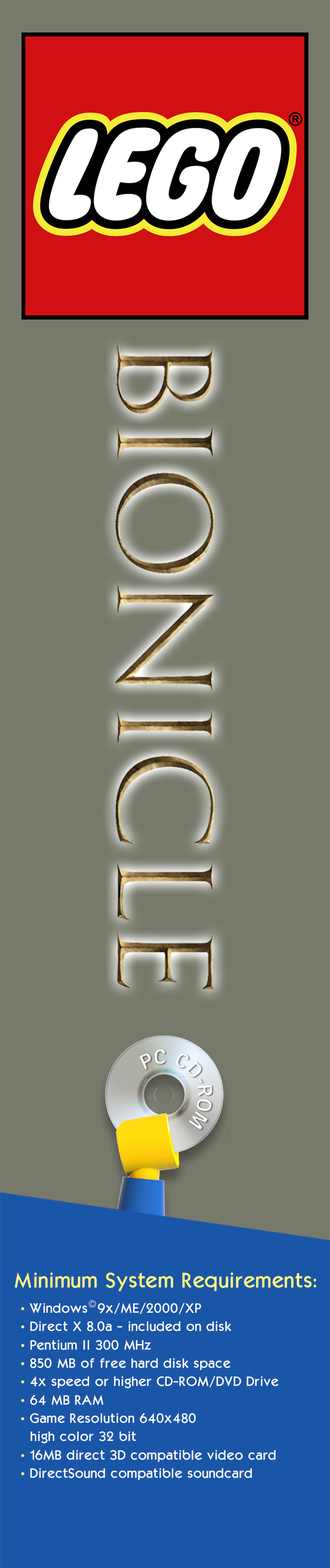
<style>
.page{position:relative;width:330px;height:1568px;background:#77796b}
.page>*{position:absolute;margin:0}
.t1{font:17.9px "KabelMedium";color:#fff97f}
.t2{font:8.8px "KabelMedium"}
.t3{font:11.5px/18.3px "KabelMedium";color:#ffffff}
.t4{font:11.5px/18.3px "KabelMedium";color:#fff97f}
</style>
<div class="page">
<p class="t1" style="left:14px;top:1272px;width:302px;height:19px">Minimum System Requirements:</p>
<p class="t2" style="left:89px;top:1300px;width:7px;height:7px">©</p>
<p class="t3" style="left:21px;top:1303px;width:257px;height:178px"><span class="t4">• </span>Windows  9x/ME/2000/XP <br><span class="t4">• </span>Direct X 8.0a - included on disk<br><span class="t4">• </span>Pentium II 300 MHz<br><span class="t4">• </span>850 MB of free hard disk space<br><span class="t4">• </span>4x speed or higher CD-ROM/DVD Drive<br><span class="t4">• </span>64 MB RAM<br><span class="t4">• </span>Game Resolution 640x480<br>  high color 32 bit<br><span class="t4">• </span>16MB direct 3D compatible video card<br><span class="t4">• </span>DirectSound compatible soundcard</p>
</div>
